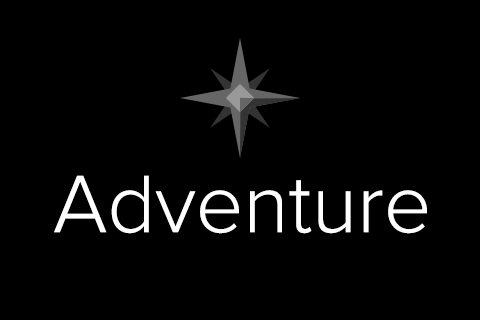
<style>
.page{position:relative;width:480px;height:320px;background:#000000}
.page>*{position:absolute;margin:0}
.t1{font:84px "ProximaNova-Light";color:#ffffff}
</style>
<div class="page">
<p class="t1" style="left:54px;top:175px;width:373px;height:59px">Adventure</p>
</div>
